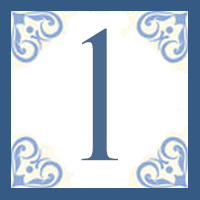
<style>
.page{position:relative;width:200px;height:200px;background:#ffffff}
.page>*{position:absolute;margin:0}
.t1{font:180px "FelixTitlingMT";color:#355a84}
</style>
<div class="page">
<p class="t1" style="left:81px;top:28px;width:37px;height:133px;opacity:0.93">1</p>
</div>
